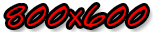
<style>
.page{position:relative;width:153px;height:32px;background:#000000}
.page>*{position:absolute;margin:0}
.t1{font:33.3px "SketchFlowPrint";color:#ff0000}
</style>
<div class="page">
<p class="t1" style="left:6px;top:5px;width:141px;height:22px">800x600</p>
</div>
